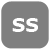
<style>
.page{position:relative;width:50px;height:50px;background:#7f7f7f}
.page>*{position:absolute;margin:0}
.t1{font:19px "Verdana-Bold";color:#ffffff}
</style>
<div class="page">
<p class="t1" style="left:12px;top:18px;width:26px;height:14px">SS</p>
</div>
